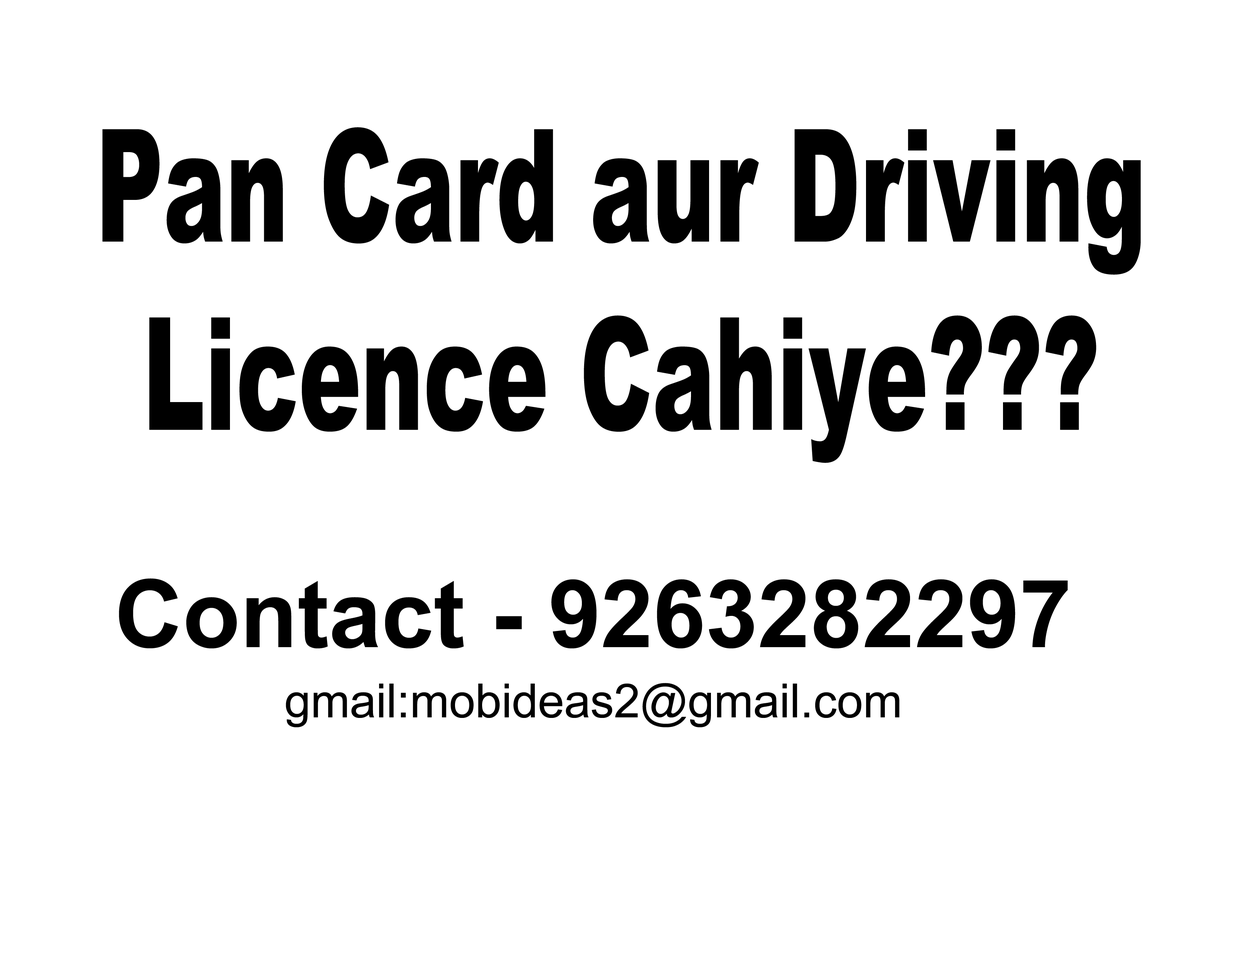
<style>
.page{position:relative;width:1242px;height:960px;background:#ffffff}
.page>*{position:absolute;margin:0}
.t1{font:156.8px "Arial-Black";color:#000000;scale:0.6 1}
.t2{font:94.1px "Arial-BoldMT";color:#000000}
.t3{font:47.1px "ArialMT";color:#000000}
</style>
<div class="page">
<p class="t1" style="left:102px;top:127px;width:1039px;height:336px;text-align:center">Pan Card aur Driving Licence Cahiye???</p>
<p class="t2" style="left:119px;top:578px;width:949px;height:71px">Contact - 9263282297</p>
<p class="t3" style="left:286px;top:683px;width:614px;height:44px">gmail:mobideas2@gmail.com</p>
</div>
